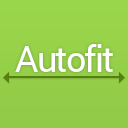
<style>
.page{position:relative;width:128px;height:128px}
.page>*{position:absolute;margin:0}
.t1{font:36px "Roboto-Regular";letter-spacing:-0.05em;color:#ffffff}
</style>
<div class="page">
<p class="t1" style="left:15px;top:44px;width:98px;height:28px">Autofit</p>
</div>
